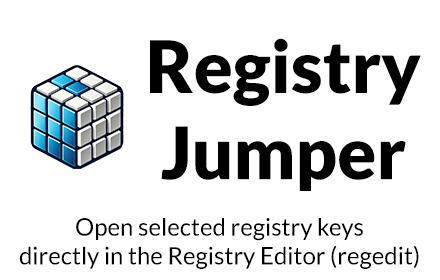
<style>
.page{position:relative;width:440px;height:280px;background:#ffffff}
.page>*{position:absolute;margin:0}
.t1{font:72px "Lato-Black";color:#000000}
.t2{font:24px "Lato-Regular";color:#000000}
</style>
<div class="page">
<p class="t1" style="left:150px;top:38px;width:271px;height:153px;text-align:center">Registry<br>Jumper</p>
<p class="t2" style="left:19px;top:218px;width:400px;height:51px;text-align:center">Open selected registry keys<br>directly in the Registry Editor (regedit)</p>
</div>
